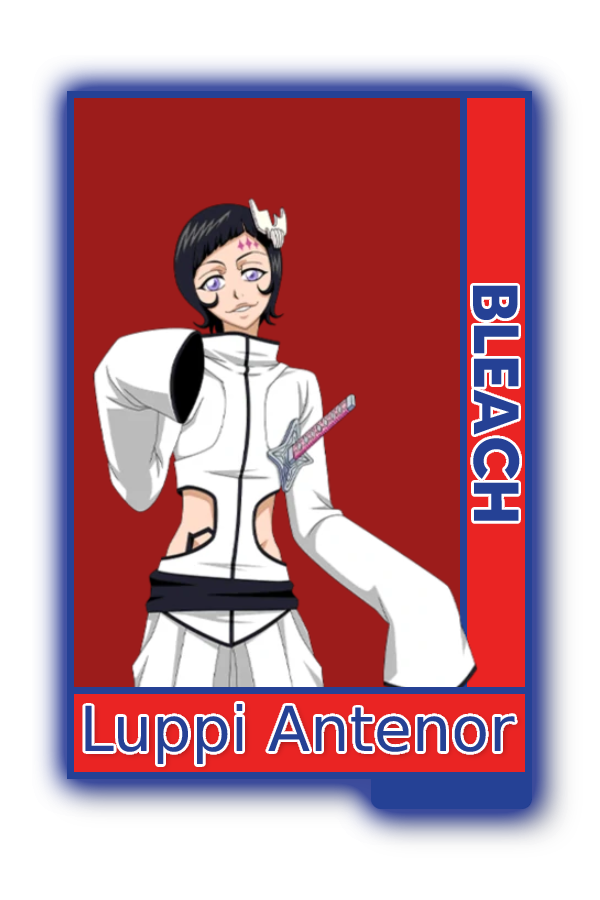
<style>
.page{position:relative;width:600px;height:900px;background:#ffffff}
.page>*{position:absolute;margin:0}
.t1{font:63.6px "MADETOMMY-Bold";color:#254195}
.t2{font:62px "CoolveticaRg-Regular";color:#254195}
</style>
<div class="page">
<p class="t1" style="left:473px;top:285px;width:47px;height:236px;rotate:90deg">BLEACH</p>
<p class="t2" style="left:85px;top:703px;width:430px;height:61px">Luppi Antenor</p>
</div>
